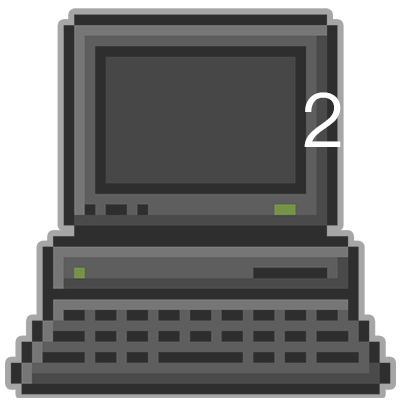
<style>
.page{position:relative;width:400px;height:400px;background:#2e2e2e}
.page>*{position:absolute;margin:0}
.t1{font:75px "PingFangTC-Regular";color:#ffffff}
</style>
<div class="page">
<p class="t1" style="left:304px;top:92px;width:37px;height:55px">2</p>
</div>
